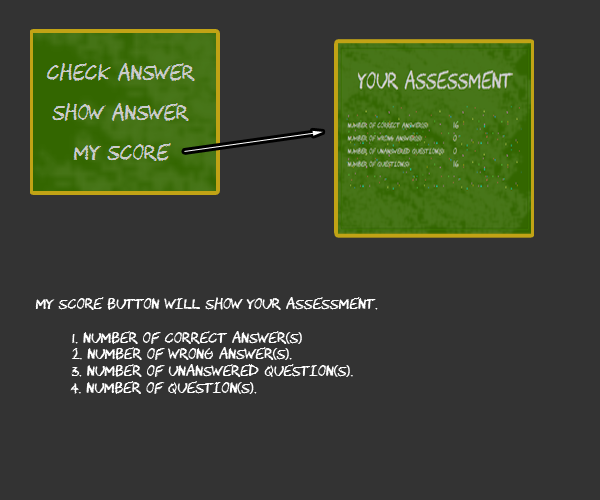
<style>
.page{position:relative;width:600px;height:500px;background:#333333}
.page>*{position:absolute;margin:0}
.t1{font:14px "CHAWP";color:#ffffff}
</style>
<div class="page">
<p class="t1" style="left:35px;top:297px;width:343px;height:97px">my score button will show your assessment.<br><br> 1. number of correct answer(s)<br> 2. number of wrong answer(s).<br> 3. number of unanswered question(s).<br> 4. number of question(s).</p>
</div>
